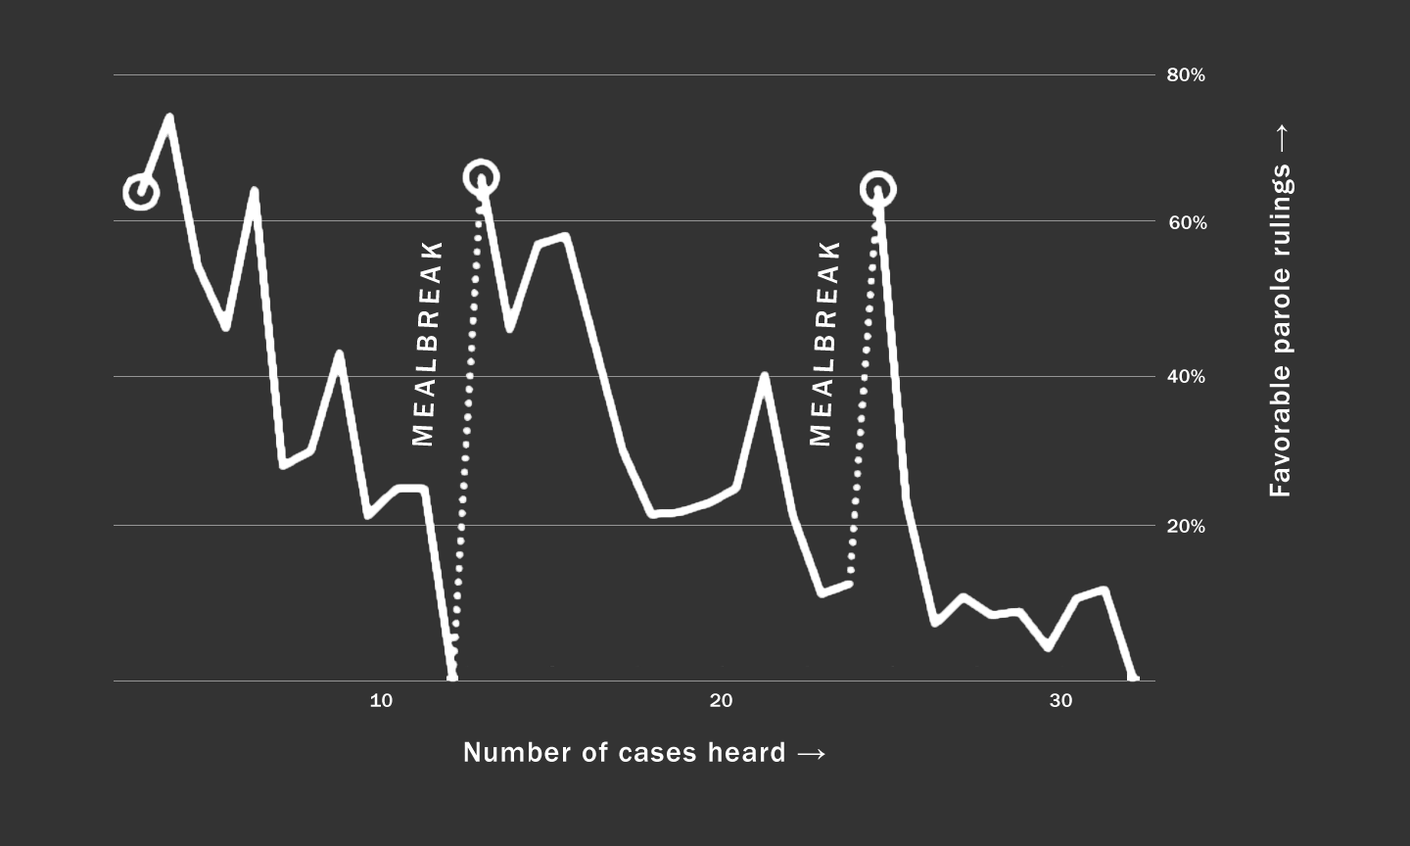
<style>
.page{position:relative;width:1410px;height:846px;background:#333333}
.page>*{position:absolute;margin:0}
.t1{font:19.6px "FranklinGothic-Medium";color:#ffffff}
.t2{font:29.4px "FranklinGothic-Medium";letter-spacing:0.05em;color:#ffffff}
.t3{font:29.4px "FranklinGothic-Medium";letter-spacing:0.2em;color:#ffffff}
</style>
<div class="page">
<p class="t1" style="left:1167px;top:68px;width:38px;height:13px">80%</p>
<p class="t2" style="left:1269px;top:124px;width:25px;height:372px;rotate:-90deg">Favorable parole rulings →</p>
<p class="t1" style="left:1169px;top:215px;width:38px;height:14px">60%</p>
<p class="t3" style="left:411px;top:242px;width:32px;height:204px;rotate:-87deg">MEALBREAK</p>
<p class="t3" style="left:809px;top:242px;width:31px;height:204px;rotate:-87deg">MEALBREAK</p>
<p class="t1" style="left:1167px;top:369px;width:38px;height:14px">40%</p>
<p class="t1" style="left:1167px;top:519px;width:38px;height:14px">20%</p>
<p class="t1" style="left:370px;top:693px;width:23px;height:14px">10</p>
<p class="t1" style="left:710px;top:693px;width:22px;height:14px">20</p>
<p class="t1" style="left:1049px;top:693px;width:23px;height:14px">30</p>
<p class="t2" style="left:464px;top:741px;width:361px;height:21px">Number of cases heard →</p>
</div>
